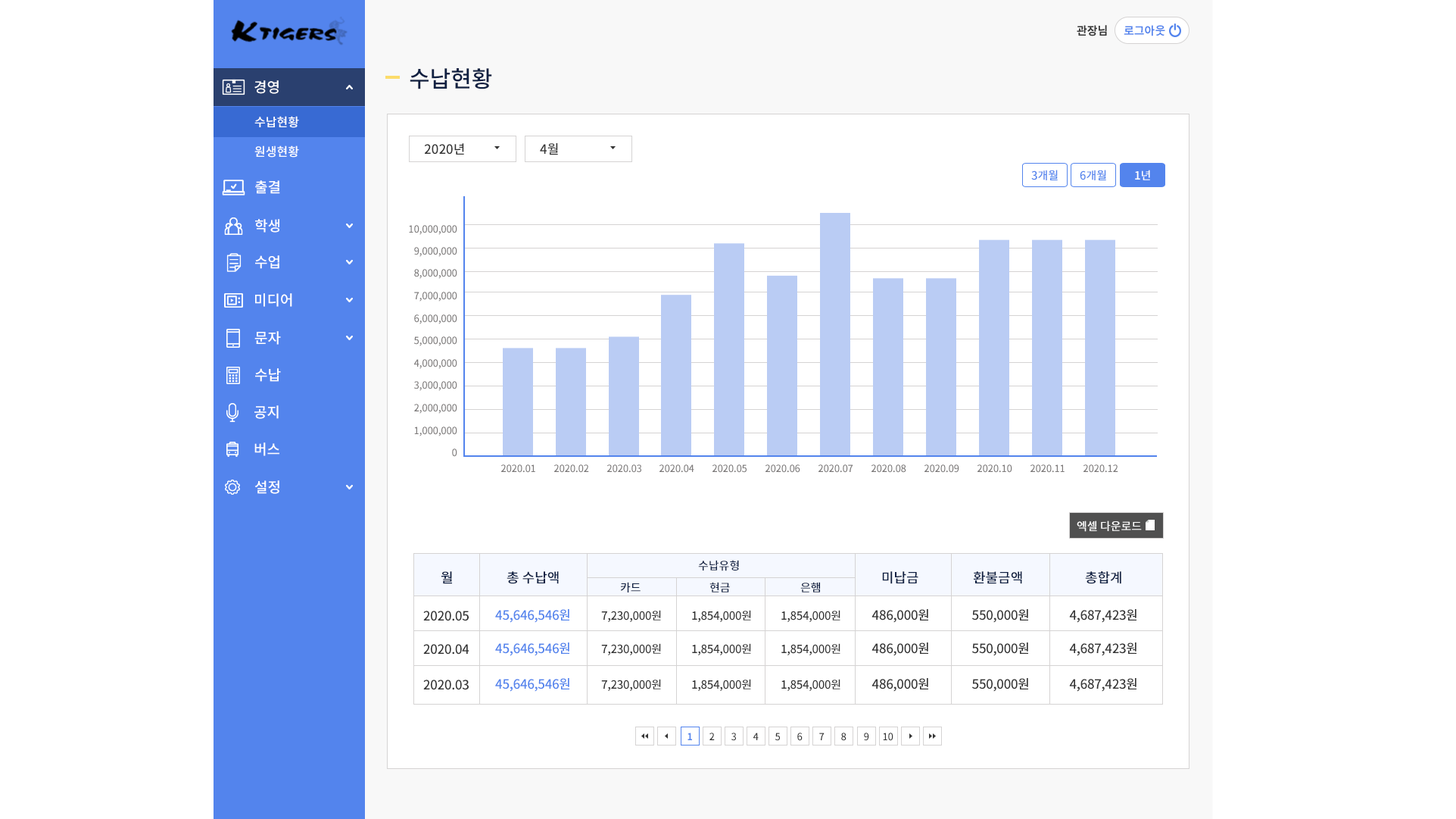
<style>
.page{position:relative;width:1456px;height:819px;background:#ffffff}
.page>*{position:absolute;margin:0}
.t1{font:22.7px "NotoSansCJKkr-Medium";color:#102042;text-transform:uppercase}
.t2{font:12.9px "NotoSansCJKkr-Medium";color:#343434;text-transform:uppercase}
.t3{font:11.4px "NotoSansCJKkr-Medium";color:#5384ed;text-transform:uppercase}
.t4{font:11.4px "NotoSansCJKkr-Medium";color:#ffffff;text-transform:uppercase}
.t5{font:9.8px "NotoSansCJKkr-Medium";letter-spacing:-0.02em;color:#7d7a7a;text-transform:uppercase}
.t6{font:9.8px "NotoSansCJKkr-Medium";color:#7d7a7a;text-transform:uppercase}
.t7{font:11.4px "NotoSansCJKkr-Medium";color:#102042;text-transform:uppercase}
.t8{font:13.6px "NotoSansCJKkr-Medium";color:#102042;text-transform:uppercase}
.t9{font:12.9px "NotoSansCJKkr-Medium";letter-spacing:-0.02em;color:#343434;text-transform:uppercase}
.t10{font:12.9px "NotoSansCJKkr-Medium";letter-spacing:-0.02em;color:#5384ed;text-transform:uppercase}
.t11{font:11.4px "NotoSansCJKkr-Medium";letter-spacing:-0.02em;color:#343434;text-transform:uppercase}
.t12{font:9.8px "NotoSansCJKkr-Bold";letter-spacing:-0.02em;color:#5384ed;text-transform:uppercase}
.t13{font:9.8px "NotoSansCJKkr-Medium";letter-spacing:-0.02em;color:#343434;text-transform:uppercase}
</style>
<div class="page">
<p class="t1" style="left:410px;top:68px;width:82px;height:21px">수납현황</p>
<p class="t2" style="left:424px;top:143px;width:40px;height:12px">2020년</p>
<p class="t2" style="left:540px;top:143px;width:18px;height:12px">4월</p>
<p class="t3" style="left:1032px;top:170px;width:26px;height:10px">3개월</p>
<p class="t3" style="left:1080px;top:170px;width:27px;height:10px">6개월</p>
<p class="t4" style="left:1135px;top:170px;width:15px;height:10px">1년</p>
<p class="t5" style="left:409px;top:225px;width:48px;height:10px">10,000,000</p>
<p class="t5" style="left:414px;top:247px;width:43px;height:10px">9,000,000</p>
<p class="t5" style="left:414px;top:269px;width:43px;height:10px">8,000,000</p>
<p class="t5" style="left:414px;top:292px;width:43px;height:9px">7,000,000</p>
<p class="t5" style="left:414px;top:314px;width:43px;height:10px">6,000,000</p>
<p class="t5" style="left:414px;top:336px;width:43px;height:10px">5,000,000</p>
<p class="t5" style="left:414px;top:359px;width:43px;height:10px">4,000,000</p>
<p class="t5" style="left:414px;top:381px;width:43px;height:10px">3,000,000</p>
<p class="t5" style="left:414px;top:404px;width:43px;height:10px">2,000,000</p>
<p class="t5" style="left:414px;top:426px;width:43px;height:10px">1,000,000</p>
<p class="t6" style="left:452px;top:448px;width:5px;height:9px">0</p>
<p class="t5" style="left:501px;top:464px;width:34px;height:9px">2020.01</p>
<p class="t5" style="left:554px;top:464px;width:35px;height:9px">2020.02</p>
<p class="t5" style="left:607px;top:464px;width:35px;height:9px">2020.03</p>
<p class="t5" style="left:660px;top:464px;width:35px;height:9px">2020.04</p>
<p class="t5" style="left:713px;top:464px;width:34px;height:9px">2020.05</p>
<p class="t5" style="left:766px;top:464px;width:35px;height:9px">2020.06</p>
<p class="t5" style="left:819px;top:464px;width:35px;height:9px">2020.07</p>
<p class="t5" style="left:872px;top:464px;width:35px;height:9px">2020.08</p>
<p class="t5" style="left:925px;top:464px;width:35px;height:9px">2020.09</p>
<p class="t5" style="left:978px;top:464px;width:35px;height:9px">2020.10</p>
<p class="t5" style="left:1031px;top:464px;width:34px;height:9px">2020.11</p>
<p class="t5" style="left:1084px;top:464px;width:35px;height:9px">2020.12</p>
<p class="t4" style="left:1077px;top:520px;width:65px;height:12px">엑셀 다운로드</p>
<p class="t7" style="left:698px;top:560px;width:41px;height:11px">수납유형</p>
<p class="t8" style="left:441px;top:571px;width:11px;height:13px">월</p>
<p class="t8" style="left:507px;top:571px;width:52px;height:13px">총 수납액</p>
<p class="t7" style="left:620px;top:582px;width:21px;height:10px">카드</p>
<p class="t7" style="left:710px;top:582px;width:20px;height:10px">현금</p>
<p class="t7" style="left:801px;top:582px;width:19px;height:10px">은햄</p>
<p class="t8" style="left:882px;top:571px;width:37px;height:13px">미납금</p>
<p class="t8" style="left:973px;top:571px;width:49px;height:13px">환불금액</p>
<p class="t8" style="left:1085px;top:571px;width:37px;height:13px">총합계</p>
<p class="t9" style="left:423px;top:610px;width:46px;height:11px">2020.05</p>
<p class="t10" style="left:495px;top:609px;width:75px;height:14px">45,646,546원</p>
<p class="t11" style="left:601px;top:610px;width:60px;height:12px">7,230,000원</p>
<p class="t11" style="left:692px;top:610px;width:59px;height:12px">1,854,000원</p>
<p class="t11" style="left:782px;top:610px;width:59px;height:12px">1,854,000원</p>
<p class="t9" style="left:872px;top:609px;width:57px;height:14px">486,000원</p>
<p class="t9" style="left:972px;top:609px;width:57px;height:14px">550,000원</p>
<p class="t9" style="left:1069px;top:609px;width:68px;height:14px">4,687,423원</p>
<p class="t9" style="left:423px;top:644px;width:47px;height:10px">2020.04</p>
<p class="t10" style="left:495px;top:642px;width:75px;height:14px">45,646,546원</p>
<p class="t11" style="left:601px;top:643px;width:60px;height:12px">7,230,000원</p>
<p class="t11" style="left:692px;top:643px;width:59px;height:12px">1,854,000원</p>
<p class="t11" style="left:782px;top:643px;width:59px;height:12px">1,854,000원</p>
<p class="t9" style="left:872px;top:642px;width:57px;height:14px">486,000원</p>
<p class="t9" style="left:972px;top:642px;width:57px;height:14px">550,000원</p>
<p class="t9" style="left:1069px;top:642px;width:68px;height:14px">4,687,423원</p>
<p class="t10" style="left:495px;top:678px;width:75px;height:13px">45,646,546원</p>
<p class="t9" style="left:872px;top:678px;width:57px;height:13px">486,000원</p>
<p class="t9" style="left:972px;top:678px;width:57px;height:13px">550,000원</p>
<p class="t9" style="left:1069px;top:678px;width:68px;height:13px">4,687,423원</p>
<p class="t9" style="left:423px;top:679px;width:46px;height:11px">2020.03</p>
<p class="t11" style="left:601px;top:679px;width:60px;height:12px">7,230,000원</p>
<p class="t11" style="left:692px;top:679px;width:59px;height:12px">1,854,000원</p>
<p class="t11" style="left:782px;top:679px;width:59px;height:12px">1,854,000원</p>
<p class="t12" style="left:688px;top:732px;width:4px;height:8px">1</p>
<p class="t13" style="left:710px;top:732px;width:5px;height:8px">2</p>
<p class="t13" style="left:732px;top:732px;width:4px;height:9px">3</p>
<p class="t13" style="left:754px;top:732px;width:5px;height:8px">4</p>
<p class="t13" style="left:776px;top:732px;width:4px;height:9px">5</p>
<p class="t13" style="left:798px;top:732px;width:5px;height:9px">6</p>
<p class="t13" style="left:819px;top:732px;width:6px;height:8px">7</p>
<p class="t13" style="left:841px;top:732px;width:6px;height:9px">8</p>
<p class="t13" style="left:864px;top:732px;width:5px;height:9px">9</p>
<p class="t13" style="left:883px;top:732px;width:11px;height:9px">10</p>
</div>
